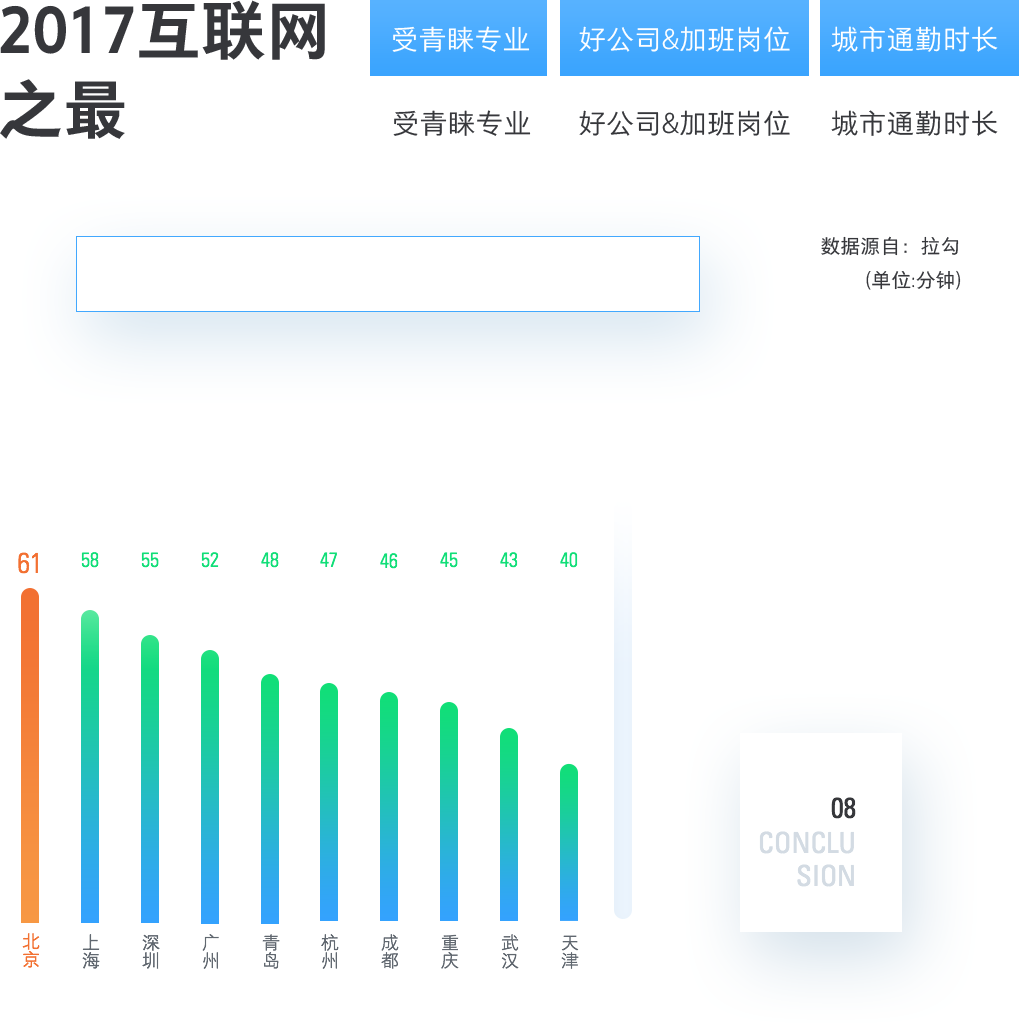
<style>
.page{position:relative;width:1024px;height:1024px;background:#ffffff}
.page>*{position:absolute;margin:0}
.t1{font:64.9px/78.9px "FZYOUH_512B--GB1-4";color:#36373b}
.t2{font:28px "FZYOUH_506L--GB1-4";color:#ffffff}
.t3{font:28px "FZYOUH_506L--GB1-4";color:#fefeff}
.t4{font:28px "FZYOUH_506L--GB1-4";color:#36373b}
.t5{font:20px "FZYOUH_508R--GB1-4";color:#36373b}
.t6{font:28px "UniversLTStd-LightCn";color:#f27032}
.t7{font:20px "UniversLTStd-LightCn";color:#11de78}
.t8{font:28.4px "UniversLTStd-Cn";color:#36373b;text-transform:uppercase}
.t9{font:28.4px/33.6px "UniversLTStd-Cn";color:#d3dbe3;text-transform:uppercase}
.t10{font:18px/36px "FZYOUH_504L--GB1-4";color:#f27132}
.t11{font:18px/36px "FZYOUH_504L--GB1-4";color:#616870}
.t12{font:18px/36px "FZYOUH_503L--GB1-4";color:#616870}
</style>
<div class="page">
<p class="t1" style="left:0px;top:0px;width:325px;height:139px">2017互联网<br>之最</p>
<p class="t2" style="left:392px;top:26px;width:138px;height:26px">受青睐专业</p>
<p class="t3" style="left:579px;top:26px;width:211px;height:26px">好公司&amp;加班岗位</p>
<p class="t2" style="left:831px;top:26px;width:167px;height:26px">城市通勤时长</p>
<p class="t4" style="left:393px;top:110px;width:138px;height:26px">受青睐专业</p>
<p class="t4" style="left:579px;top:110px;width:211px;height:26px">好公司&amp;加班岗位</p>
<p class="t4" style="left:831px;top:110px;width:167px;height:26px">城市通勤时长</p>
<p class="t5" style="left:821px;top:236px;width:138px;height:20px">数据源自：拉勾</p>
<p class="t5" style="left:866px;top:270px;width:95px;height:20px">(单位:分钟)</p>
<p class="t6" style="left:18px;top:552px;width:20px;height:22px">61</p>
<p class="t7" style="left:81px;top:552px;width:18px;height:16px">58</p>
<p class="t7" style="left:141px;top:552px;width:18px;height:16px">55</p>
<p class="t7" style="left:201px;top:552px;width:18px;height:16px">52</p>
<p class="t7" style="left:261px;top:552px;width:18px;height:16px">48</p>
<p class="t7" style="left:320px;top:552px;width:17px;height:15px">47</p>
<p class="t7" style="left:380px;top:553px;width:18px;height:16px">46</p>
<p class="t7" style="left:440px;top:552px;width:18px;height:16px">45</p>
<p class="t7" style="left:500px;top:552px;width:18px;height:16px">43</p>
<p class="t7" style="left:560px;top:552px;width:18px;height:16px">40</p>
<p class="t8" style="left:831px;top:797px;width:25px;height:22px">08</p>
<p class="t9" style="left:759px;top:831px;width:95px;height:56px;text-align:right">conclu<br>sion</p>
<p class="t10" style="left:22px;top:933px;width:18px;height:35px">北京</p>
<p class="t11" style="left:82px;top:934px;width:18px;height:35px">上海</p>
<p class="t11" style="left:142px;top:934px;width:18px;height:35px">深圳</p>
<p class="t12" style="left:202px;top:934px;width:17px;height:35px">广州</p>
<p class="t12" style="left:262px;top:934px;width:18px;height:35px">青岛</p>
<p class="t12" style="left:321px;top:934px;width:18px;height:35px">杭州</p>
<p class="t12" style="left:381px;top:934px;width:18px;height:35px">成都</p>
<p class="t12" style="left:441px;top:934px;width:18px;height:35px">重庆</p>
<p class="t12" style="left:501px;top:934px;width:18px;height:35px">武汉</p>
<p class="t12" style="left:561px;top:935px;width:18px;height:34px">天津</p>
</div>
